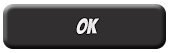
<style>
.page{position:relative;width:169px;height:53px;background:#312f2f}
.page>*{position:absolute;margin:0}
.t1{font:21px "Bangers-Regular";color:#f1efef}
</style>
<div class="page">
<p class="t1" style="left:76px;top:18px;width:24px;height:16px">OK</p>
</div>
